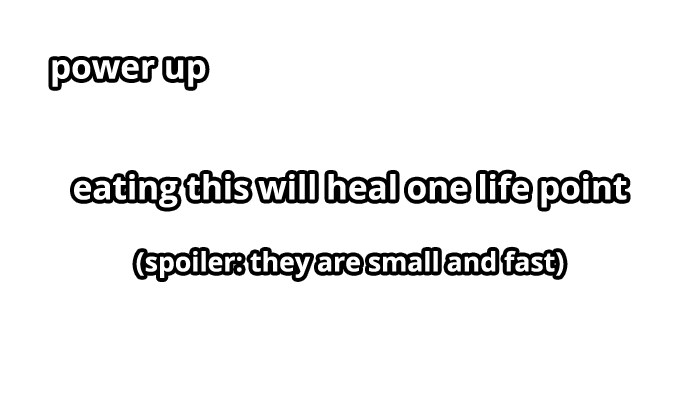
<style>
.page{position:relative;width:700px;height:400px;background:#ffffff}
.page>*{position:absolute;margin:0}
.t1{font:33.3px "OpenSans-Bold";color:#ffffff}
.t2{font:26.7px "OpenSans-Bold";color:#ffffff}
</style>
<div class="page">
<p class="t1" style="left:52px;top:60px;width:154px;height:27px">power up</p>
<p class="t1" style="left:74px;top:173px;width:553px;height:105px;text-align:center">eating this will heal one life point<br><br><span class="t2">(spoiler: they are small and fast)</span></p>
</div>
